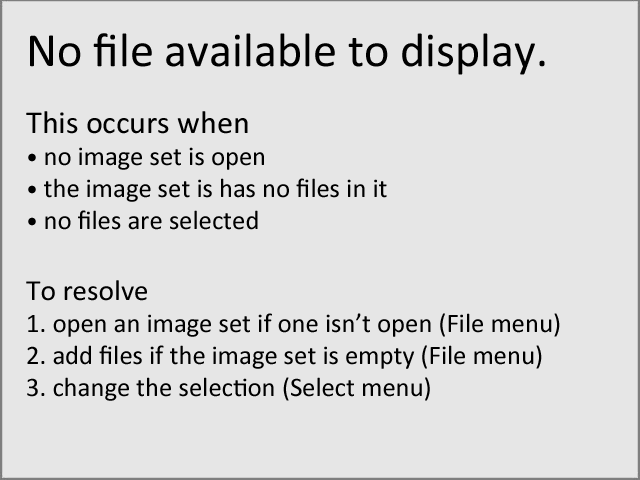
<style>
.page{position:relative;width:640px;height:480px;background:#e6e6e6}
.page>*{position:absolute;margin:0}
.t1{font:26.7px "Calibri";color:#000000}
.t2{font:48px "Calibri";color:#000000}
.t3{font:32px "Calibri";color:#000000}
.t4{font:24px "Calibri";color:#000000}
.t5{font:29.3px "Calibri";color:#000000}
</style>
<div class="page">
<p class="t1" style="left:26px;top:33px;width:534px;height:368px"><span class="t2">No file available to display.<br><br></span><span class="t3">This occurs when<br></span><span class="t4">• </span>no image set is open<br><span class="t4">• </span>the image set is has no files in it<br><span class="t4">• </span>no files are selected<br><span class="t5"><br>To resolve<br></span>1. open an image set if one isn’t open (File menu)<br>2. add files if the image set is empty (File menu)<br>3. change the selection (Select menu)</p>
</div>
